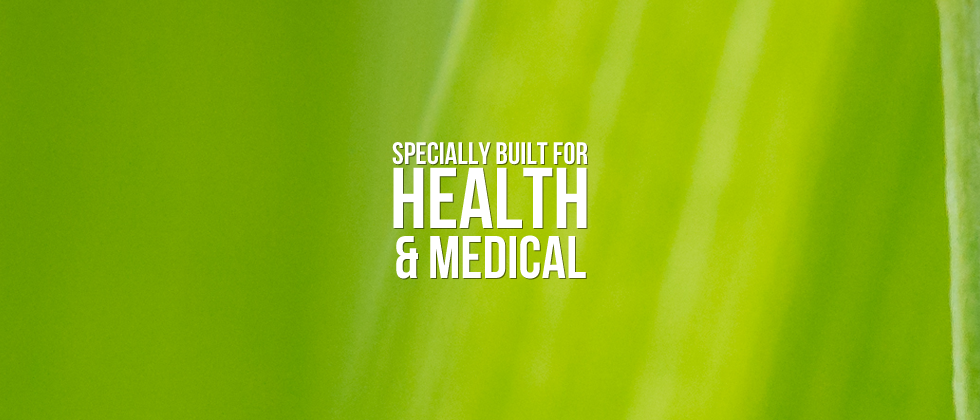
<style>
.page{position:relative;width:980px;height:420px}
.page>*{position:absolute;margin:0}
.t1{font:31px/54px "BebasNeue";color:#ffffff}
.t2{font:86px/64px "BebasNeue";color:#ffffff}
.t3{font:60px/50px "BebasNeue";color:#ffffff}
</style>
<div class="page">
<p class="t1" style="left:392px;top:142px;width:196px;height:137px;text-align:center">Specially built for<br><span class="t2">Health<br></span><span class="t3">&amp; Medical</span></p>
</div>
